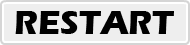
<style>
.page{position:relative;width:190px;height:45px;background:#eeeeee}
.page>*{position:absolute;margin:0}
.t1{font:34px "ErasITC-Bold";color:#000000}
</style>
<div class="page">
<p class="t1" style="left:15px;top:11px;width:159px;height:23px">RESTART</p>
</div>
